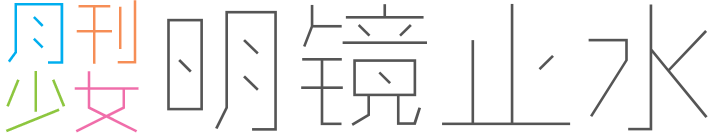
<style>
.page{position:relative;width:720px;height:133px;background:#ffffff}
.page>*{position:absolute;margin:0}
.t1{font:70.9px/70.9px "MFShangHei_Noncommercial-ExLight";color:#00aeef}
.t2{font:70.9px/70.9px "MFShangHei_Noncommercial-ExLight";color:#f68e56}
.t3{font:70.9px/70.9px "MFShangHei_Noncommercial-ExLight";color:#8dc63f}
.t4{font:70.9px/70.9px "MFShangHei_Noncommercial-ExLight";color:#f06eaa}
.t5{font:141.9px "MFShangHei_Noncommercial-UltLight";color:#555555}
</style>
<div class="page">
<p class="t1" style="left:5px;top:0px;width:134px;height:133px">月<span class="t2">刊<br></span><span class="t3">少</span><span class="t4">女</span></p>
<p class="t5" style="left:167px;top:3px;width:541px;height:128px">明镜止水</p>
</div>
